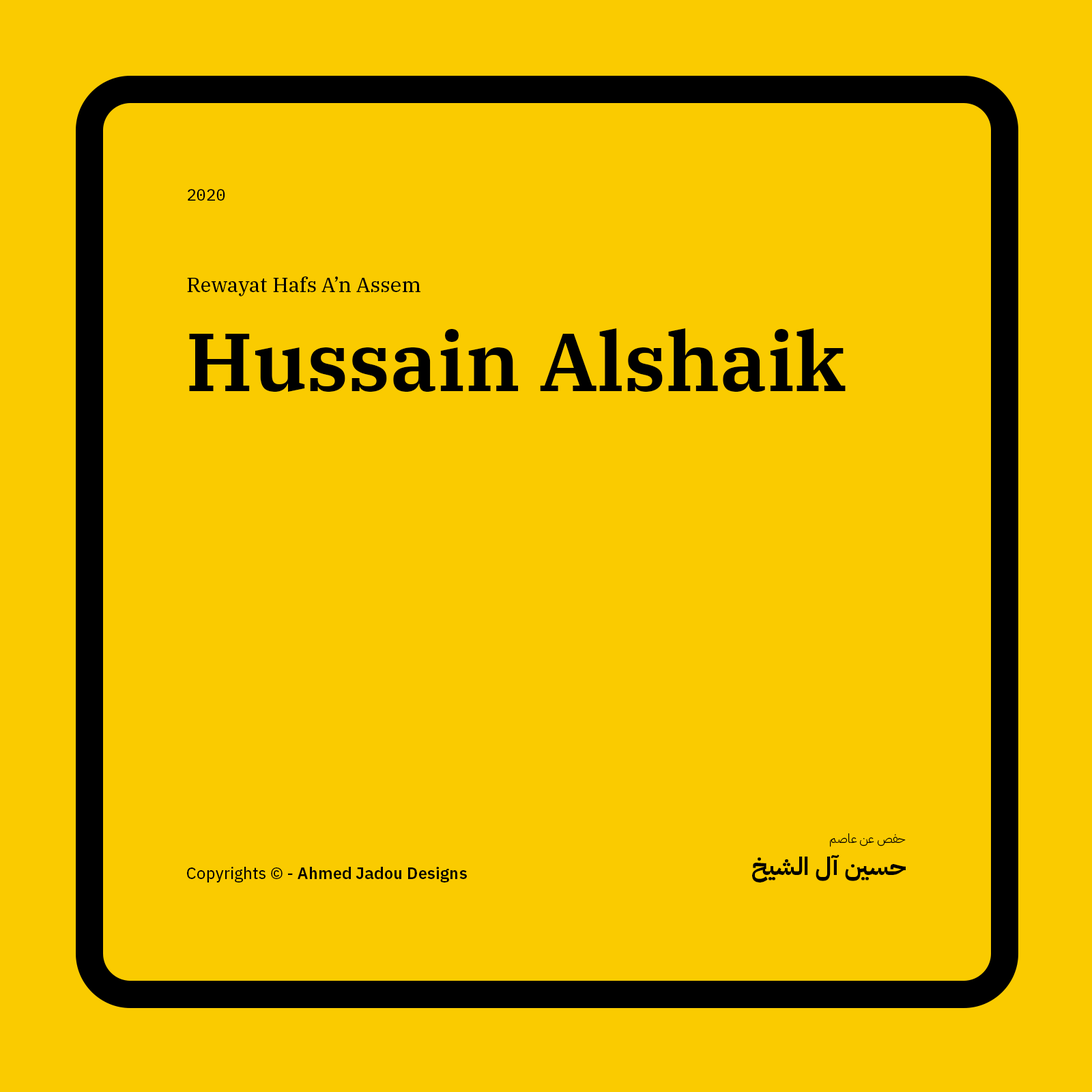
<style>
.page{position:relative;width:1092px;height:1092px;background:#facb00}
.page>*{position:absolute;margin:0}
.t1{font:16.4px "IBMPlexMono-Text";color:#000000}
.t2{font:20.5px "IBMPlexSerif-Text";color:#000000}
.t3{font:81.9px "IBMPlexSerif-SemiBold";color:#000000}
.t4{font:12.3px "IBMPlexArabic-Light";color:#000000}
.t5{font:24.6px "IBMPlexArabic-Bold";color:#000000}
.t6{font:16.4px "IBMPlexSans-SemiBold";color:#000000}
.t7{font:16.4px "IBMPlexSans-Text";color:#000000}
</style>
<div class="page">
<p class="t1" style="left:188px;top:189px;width:37px;height:12px">2020</p>
<p class="t2" style="left:187px;top:276px;width:233px;height:20px">Rewayat Hafs A’n Assem</p>
<p class="t3" style="left:189px;top:328px;width:657px;height:64px">Hussain Alshaik</p>
<p class="t4" style="left:830px;top:833px;width:76px;height:14px">حفص عن عاصم</p>
<p class="t5" style="left:752px;top:854px;width:154px;height:28px">حسين آل الشيخ</p>
<p class="t6" style="left:187px;top:867px;width:280px;height:15px"><span class="t7">Copyrights © - </span>Ahmed Jadou Designs</p>
</div>
